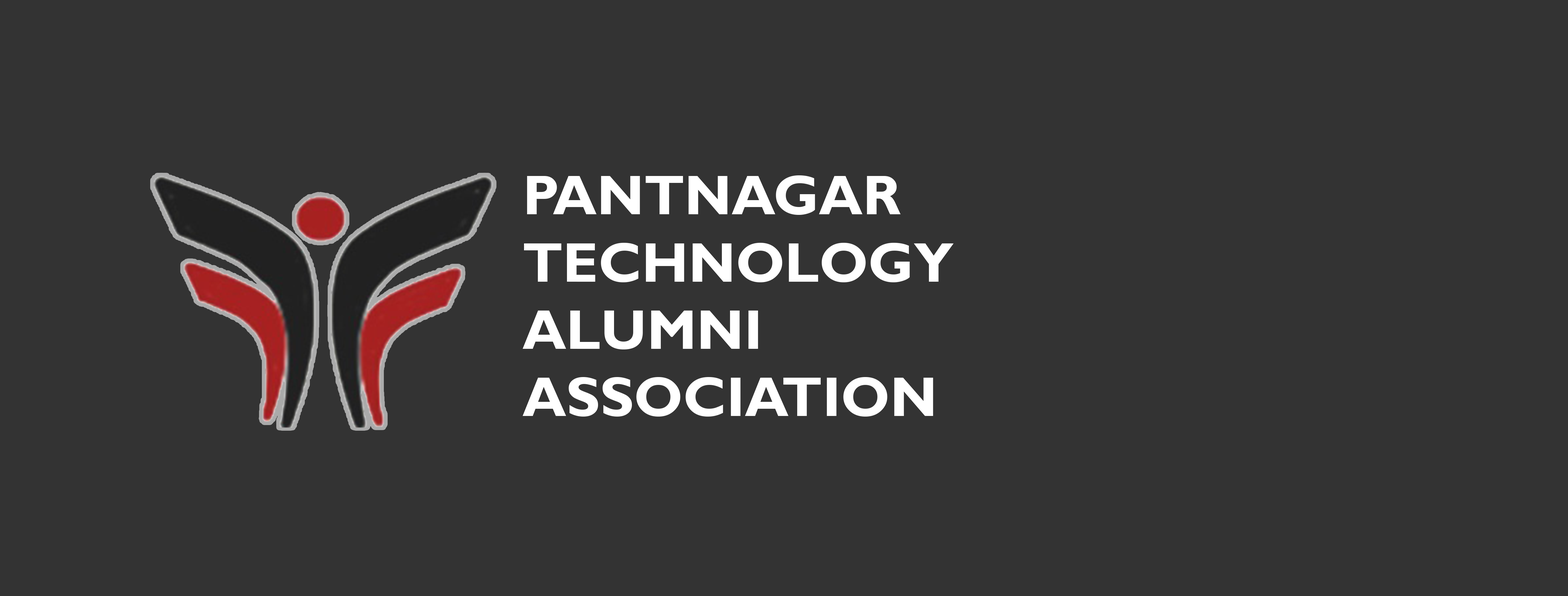
<style>
.page{position:relative;width:1568px;height:596px;background:#333333}
.page>*{position:absolute;margin:0}
.t1{font:56.1px "GillSansMT-Bold";color:#ffffff}
</style>
<div class="page">
<p class="t1" style="left:522px;top:175px;width:432px;height:241px">PANTNAGAR<br>TECHNOLOGY<br>ALUMNI<br>ASSOCIATION</p>
</div>
